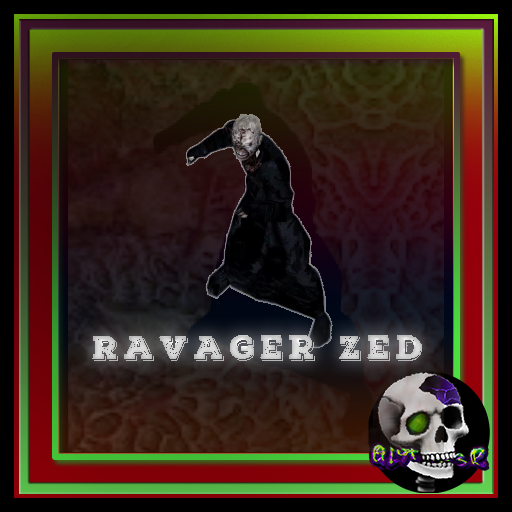
<style>
.page{position:relative;width:512px;height:512px}
.page>*{position:absolute;margin:0}
.t1{font:31.9px "NexaRustSlabDemo-BlackShadow1";letter-spacing:0.18em;color:#cccccc}
</style>
<div class="page">
<p class="t1" style="left:92px;top:335px;width:330px;height:26px">Ravager Zed</p>
</div>
